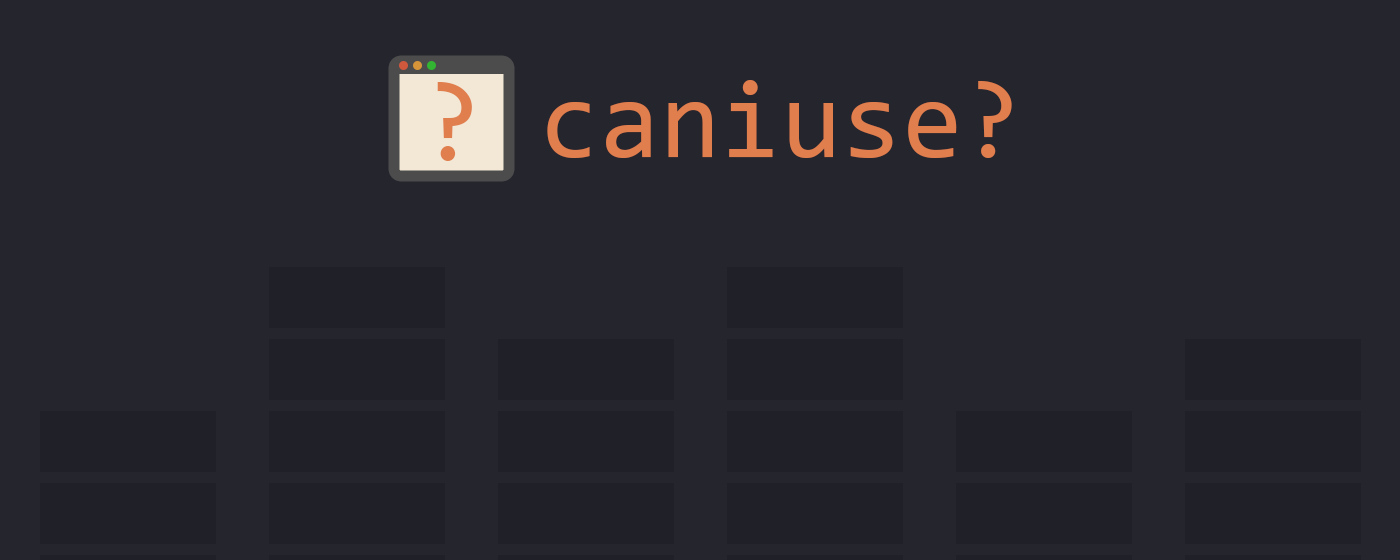
<style>
.page{position:relative;width:1400px;height:560px;background:#25252e}
.page>*{position:absolute;margin:0}
.t1{font:110px "Consolas";color:#e07e4d}
</style>
<div class="page">
<p class="t1" style="left:547px;top:80px;width:465px;height:78px">caniuse?</p>
</div>
